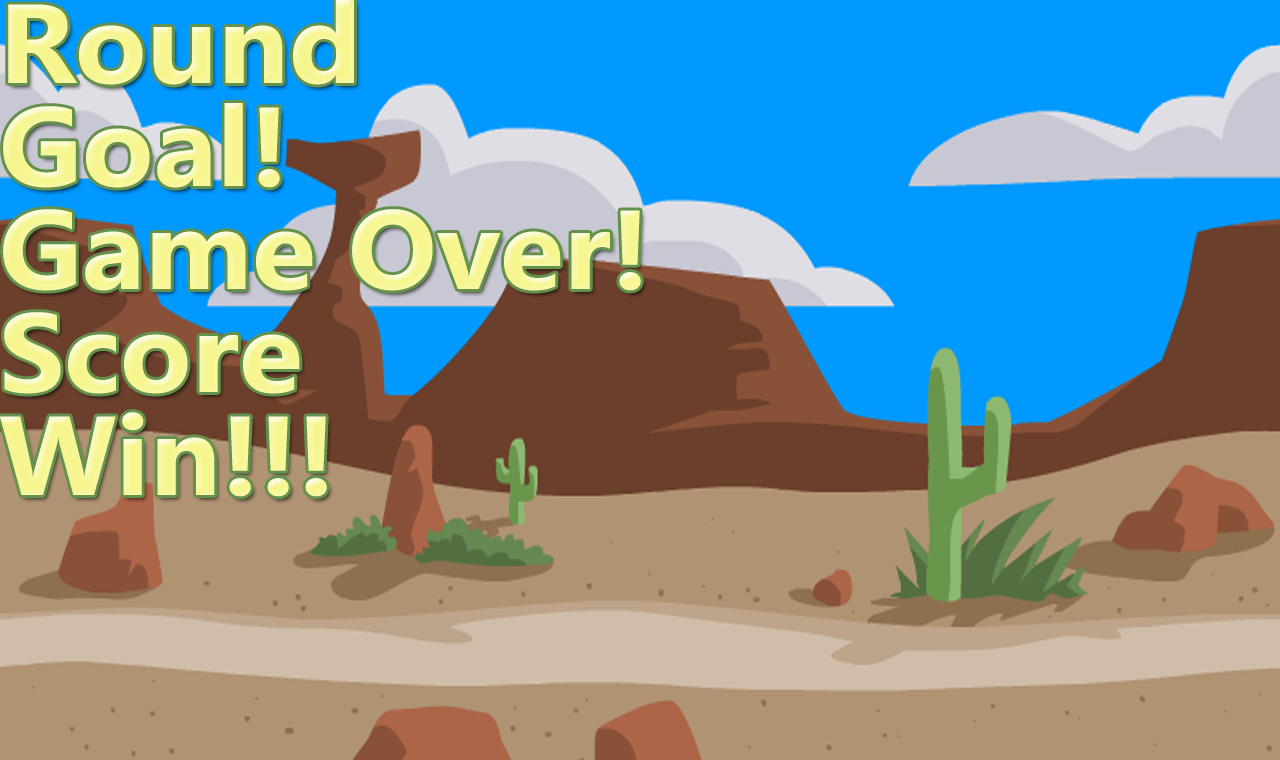
<style>
.page{position:relative;width:1280px;height:760px;background:#0099ff}
.page>*{position:absolute;margin:0}
.t1{font:112.3px/103px "Ebrima-Bold";color:#f7f698;scale:1.04 1}
</style>
<div class="page">
<p class="t1" style="left:0px;top:0px;width:641px;height:497px">Round<br>Goal!<br>Game Over!<br>Score<br>Win!!!</p>
</div>
